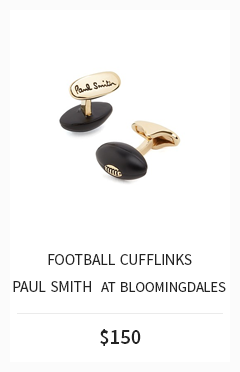
<style>
.page{position:relative;width:240px;height:372px;background:#ffffff}
.page>*{position:absolute;margin:0}
.t1{font:22.2px "SourceSansPro-Regular";color:#232323;font-variant:small-caps}
.t2{font:20.8px "SourceSansPro-Regular";color:#232323;font-variant:small-caps}
.t3{font:20.6px "SourceSansPro-Semibold";color:#232323}
</style>
<div class="page">
<p class="t1" style="left:48px;top:254px;width:144px;height:11px">football cufflinks</p>
<p class="t2" style="left:13px;top:281px;width:213px;height:11px"><span class="t1">paul smith </span> at bloomingdales</p>
<p class="t3" style="left:100px;top:329px;width:41px;height:17px">$150</p>
</div>
